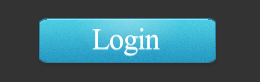
<style>
.page{position:relative;width:260px;height:82px;background:#333333}
.page>*{position:absolute;margin:0}
.t1{font:37.3px "Aparajita";letter-spacing:-0.025em;color:#ffffff}
</style>
<div class="page">
<p class="t1" style="left:92px;top:28px;width:68px;height:28px">Login</p>
</div>
